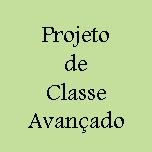
<style>
.page{position:relative;width:152px;height:152px;background:#c4df9b}
.page>*{position:absolute;margin:0}
.t1{font:24px "Andalus";color:#000000}
</style>
<div class="page">
<p class="t1" style="left:28px;top:26px;width:96px;height:107px;text-align:center">Projeto<br>de<br>Classe<br>Avançado</p>
</div>
